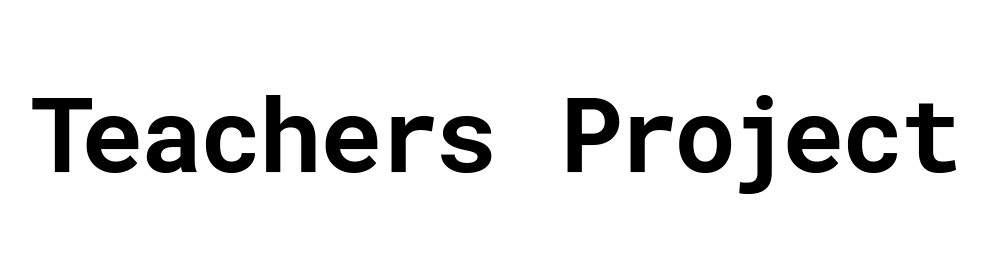
<style>
.page{position:relative;width:1000px;height:272px;background:#ffffff}
.page>*{position:absolute;margin:0}
.t1{font:104.3px "RobotoMono-Bold";color:#000000}
</style>
<div class="page">
<p class="t1" style="left:32px;top:95px;width:924px;height:99px">Teachers Project</p>
</div>
